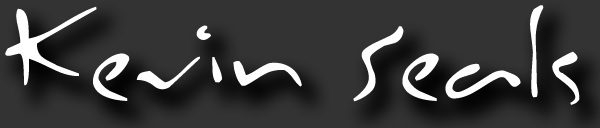
<style>
.page{position:relative;width:600px;height:128px;background:#333333}
.page>*{position:absolute;margin:0}
.t1{font:131.3px "Inkburrow";color:#ffffff}
</style>
<div class="page">
<p class="t1" style="left:5px;top:5px;width:575px;height:100px">Kevin Seals</p>
</div>
